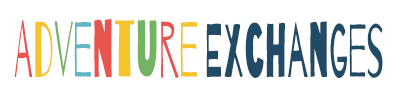
<style>
.page{position:relative;width:400px;height:100px;background:#ffffff}
.page>*{position:absolute;margin:0}
.t1{font:76px "Barrio-Regular";color:#204a65;scale:0.47 1}
.t2{font:79px "Barrio-Regular";color:#e8554e;scale:0.47 1}
.t3{font:79px "Barrio-Regular";color:#f7c32b;scale:0.47 1}
.t4{font:79px "Barrio-Regular";color:#74b364;scale:0.47 1}
.t5{font:79px "Barrio-Regular";color:#61b6c5;scale:0.47 1}
</style>
<div class="page">
<p class="t1" style="left:14px;top:19px;width:369px;height:59px"><span class="t2">A</span><span class="t3">d</span><span class="t4">v</span><span class="t5">e</span><span class="t2">n</span><span class="t3">t</span><span class="t4">u</span><span class="t2">r</span><span class="t3">e </span>Exchanges</p>
</div>
